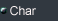
<style>
.page{position:relative;width:58px;height:21px;background:#313840}
.page>*{position:absolute;margin:0}
.t1{font:12px "ArialMT";color:#fff7f7}
</style>
<div class="page">
<p class="t1" style="left:10px;top:6px;width:26px;height:10px">Char</p>
</div>
